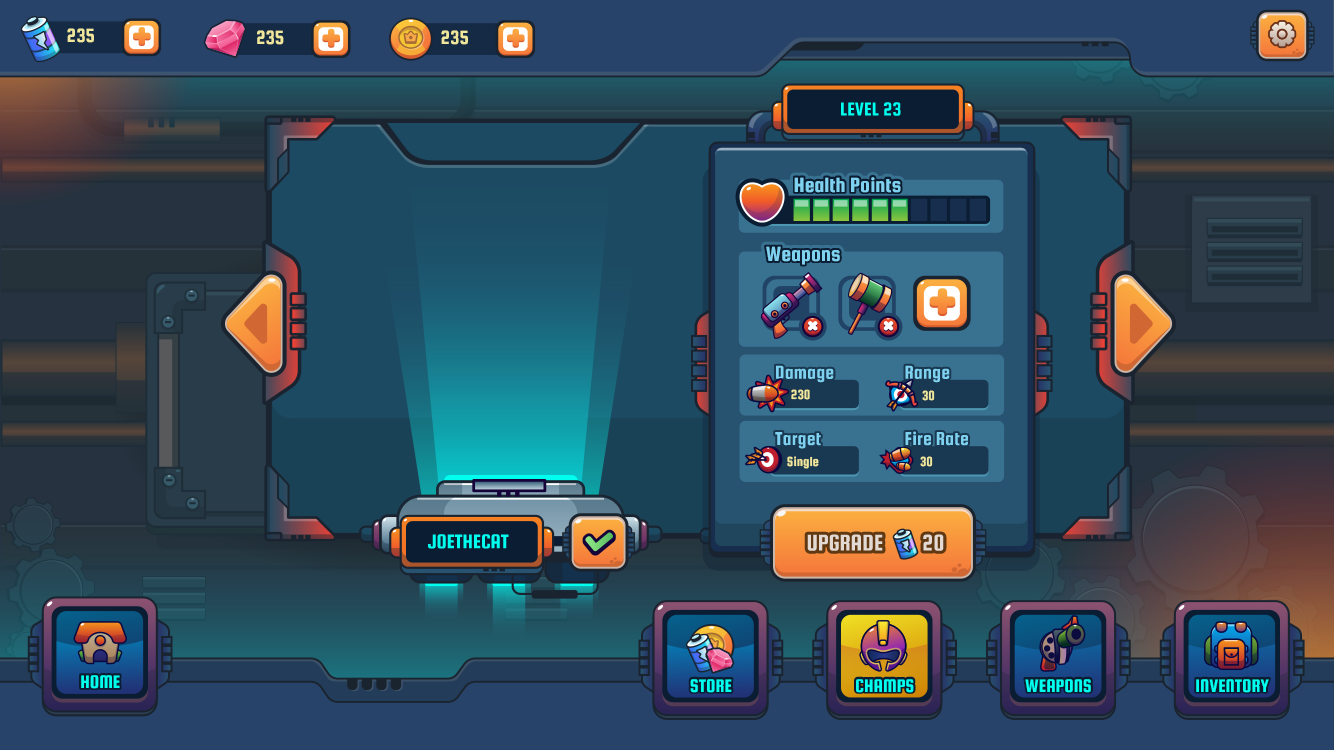
<style>
.page{position:relative;width:1334px;height:750px}
.page>*{position:absolute;margin:0}
.t1{font:20.5px "SquadaOne-Regular";color:#efe79c}
.t2{font:22.1px "SquadaOne-Regular";color:#7fd2ef}
.t3{font:14.1px "SquadaOne-Regular";color:#efe79c}
.t4{font:19.5px "SquadaOne-Regular";color:#00ffef;text-transform:uppercase}
</style>
<div class="page">
<p class="t1" style="left:67px;top:28px;width:27px;height:15px">235</p>
<p class="t1" style="left:257px;top:30px;width:27px;height:15px">235</p>
<p class="t1" style="left:441px;top:30px;width:27px;height:15px">235</p>
<p class="t2" style="left:794px;top:177px;width:107px;height:16px">Health Points</p>
<p class="t2" style="left:794px;top:177px;width:107px;height:16px">Health Points</p>
<p class="t2" style="left:766px;top:246px;width:74px;height:19px">Weapons</p>
<p class="t2" style="left:766px;top:246px;width:74px;height:19px">Weapons</p>
<p class="t3" style="left:791px;top:389px;width:19px;height:11px">230</p>
<p class="t3" style="left:922px;top:390px;width:13px;height:11px">30</p>
<p class="t3" style="left:787px;top:456px;width:32px;height:13px">Single</p>
<p class="t3" style="left:920px;top:456px;width:13px;height:11px">30</p>
<p class="t4" style="left:81px;top:675px;width:39px;height:14px">Home</p>
<p class="t4" style="left:81px;top:675px;width:39px;height:14px">Home</p>
<p class="t4" style="left:690px;top:679px;width:42px;height:14px">Store</p>
<p class="t4" style="left:690px;top:679px;width:42px;height:14px">Store</p>
<p class="t4" style="left:856px;top:679px;width:58px;height:14px">champs</p>
<p class="t4" style="left:856px;top:679px;width:58px;height:14px">champs</p>
<p class="t4" style="left:1025px;top:679px;width:66px;height:14px">Weapons</p>
<p class="t4" style="left:1025px;top:679px;width:66px;height:14px">Weapons</p>
<p class="t4" style="left:1196px;top:679px;width:73px;height:14px">Inventory</p>
<p class="t4" style="left:1196px;top:679px;width:73px;height:14px">Inventory</p>
</div>
